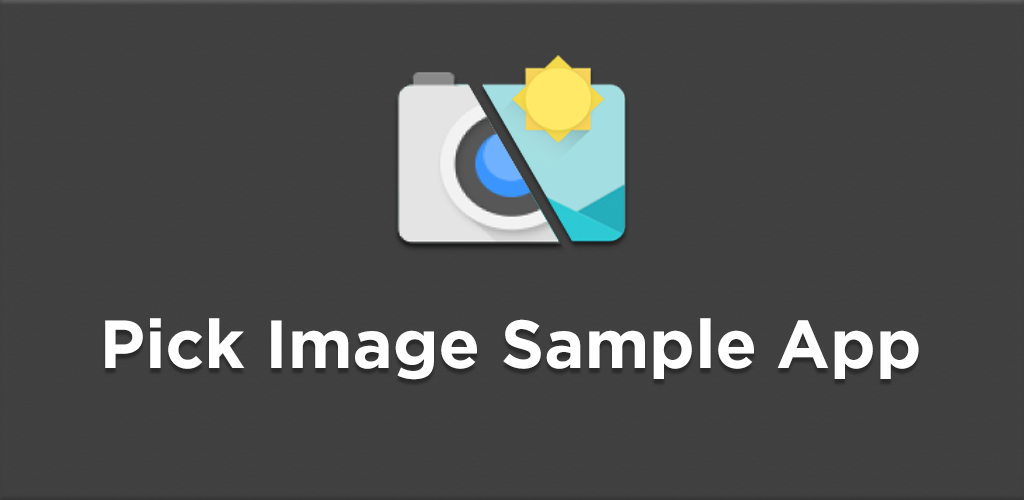
<style>
.page{position:relative;width:1024px;height:500px;background:#404040}
.page>*{position:absolute;margin:0}
.t1{font:68px "Gotham-Bold";color:#ffffff}
</style>
<div class="page">
<p class="t1" style="left:105px;top:318px;width:814px;height:62px">Pick Image Sample App</p>
</div>
